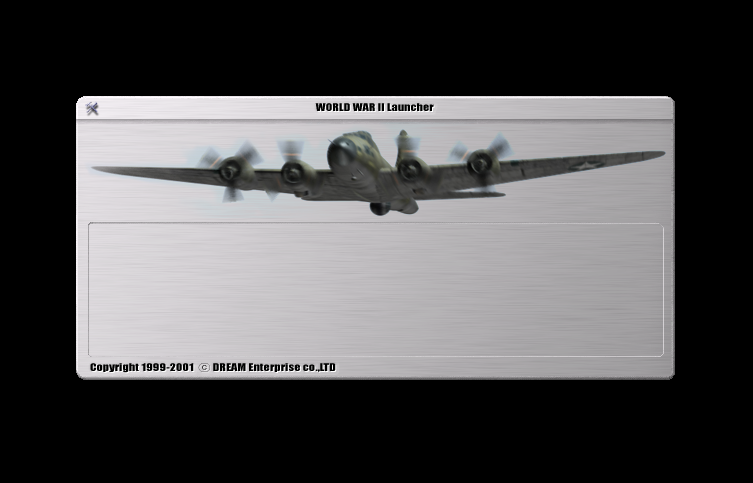
<style>
.page{position:relative;width:753px;height:483px;background:#000000}
.page>*{position:absolute;margin:0}
.t1{font:10px "Impact";color:#000000;scale:1.23 1}
.t2{font:10px "Gulim";color:#000000;scale:1.23 1}
</style>
<div class="page">
<p class="t1" style="left:315px;top:103px;width:119px;height:8px">WORLD WAR II Launcher</p>
<p class="t1" style="left:90px;top:363px;width:246px;height:10px">Copyright 1999-2001  <span class="t2">ⓒ</span> DREAM Enterprise co.,LTD</p>
</div>
